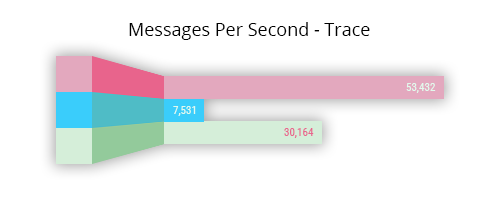
<style>
.page{position:relative;width:500px;height:200px;background:#ffffff}
.page>*{position:absolute;margin:0}
.t1{font:18px "OpenSans";color:#000000}
.t2{font:11px "RobotoCondensed-Regular";color:#e2faed}
.t3{font:11px "RobotoCondensed-Regular";color:#e8648c}
</style>
<div class="page">
<p class="t1" style="left:129px;top:22px;width:241px;height:18px">Messages Per Second - Trace</p>
<p class="t2" style="left:406px;top:83px;width:30px;height:10px">53,432</p>
<p class="t2" style="left:173px;top:106px;width:23px;height:10px">7,531</p>
<p class="t3" style="left:284px;top:128px;width:30px;height:10px">30,164</p>
</div>
